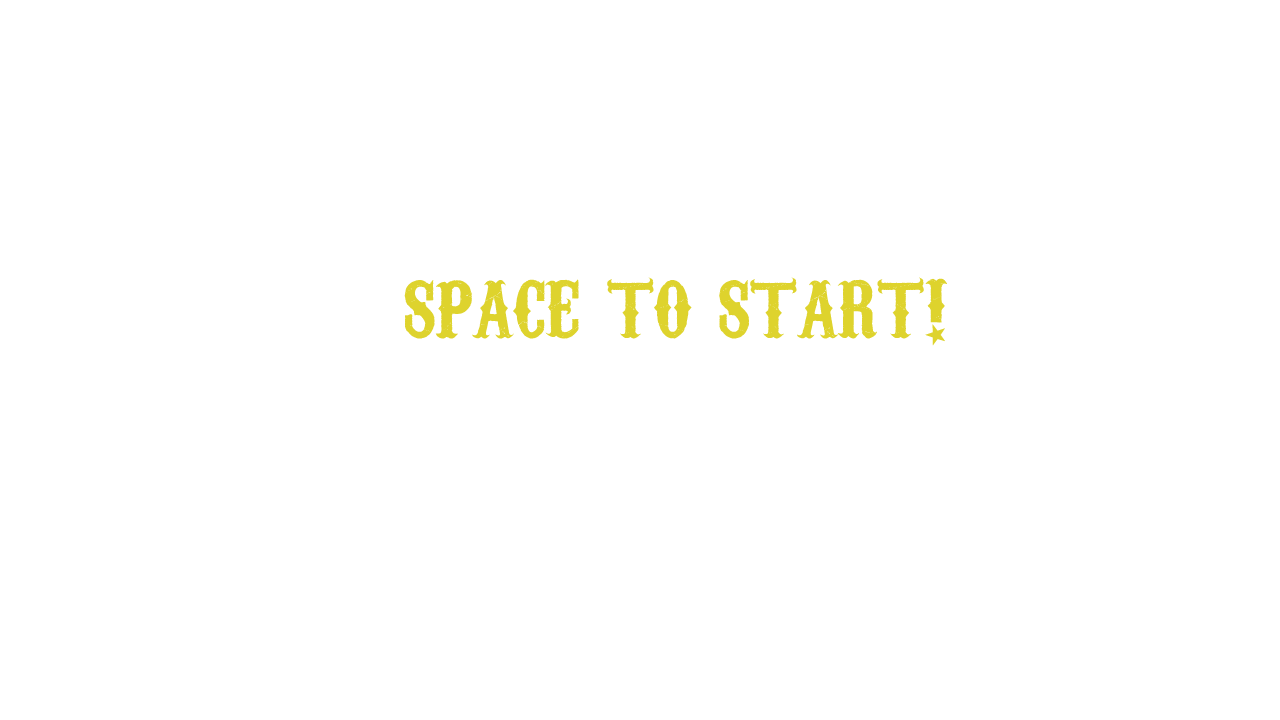
<style>
.page{position:relative;width:1280px;height:720px;background:#ffffff}
.page>*{position:absolute;margin:0}
.t1{font:100px "CarnivaleeFreakshow";color:#ded32d}
</style>
<div class="page">
<p class="t1" style="left:404px;top:277px;width:543px;height:69px">space to start!</p>
</div>
